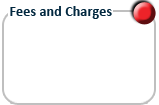
<style>
.page{position:relative;width:159px;height:105px;background:#ffffff}
.page>*{position:absolute;margin:0}
.t1{font:14px "Calibri-Bold";letter-spacing:0.01em;color:#02283f}
</style>
<div class="page">
<p class="t1" style="left:10px;top:6px;width:102px;height:13px">Fees and Charges</p>
</div>
